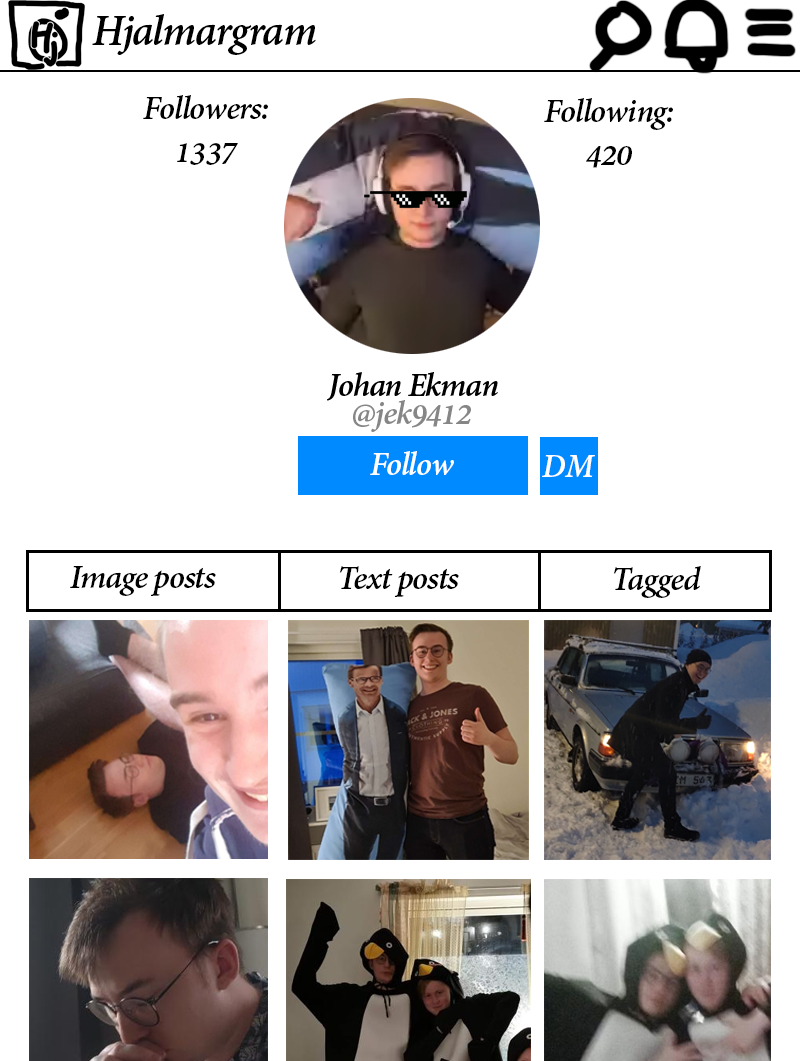
<style>
.page{position:relative;width:800px;height:1061px;background:#ffffff}
.page>*{position:absolute;margin:0}
.t1{font:36px "AdobeDevanagari-BoldItalic";letter-spacing:-0.03em;color:#000000}
.t2{font:36px "AdobeDevanagari-BoldItalic";letter-spacing:-0.03em;color:#ffffff}
</style>
<div class="page">
<p class="t1" style="left:143px;top:95px;width:125px;height:70px;text-align:center">Followers:<br>1337</p>
<p class="t1" style="left:544px;top:98px;width:129px;height:70px;text-align:center">Following:<br>420</p>
<p class="t2" style="left:542px;top:455px;width:53px;height:22px">DM</p>
<p class="t1" style="left:70px;top:566px;width:146px;height:30px">Image posts</p>
<p class="t1" style="left:339px;top:566px;width:120px;height:31px">Text posts</p>
<p class="t1" style="left:613px;top:566px;width:88px;height:32px">Tagged</p>
</div>
